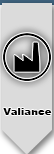
<style>
.page{position:relative;width:54px;height:154px;background:#dbdbdb}
.page>*{position:absolute;margin:0}
.t1{font:10.4px "Arial-Black";letter-spacing:-0.01em;color:#000000}
</style>
<div class="page">
<p class="t1" style="left:3px;top:108px;width:49px;height:7px">Valiance</p>
</div>
